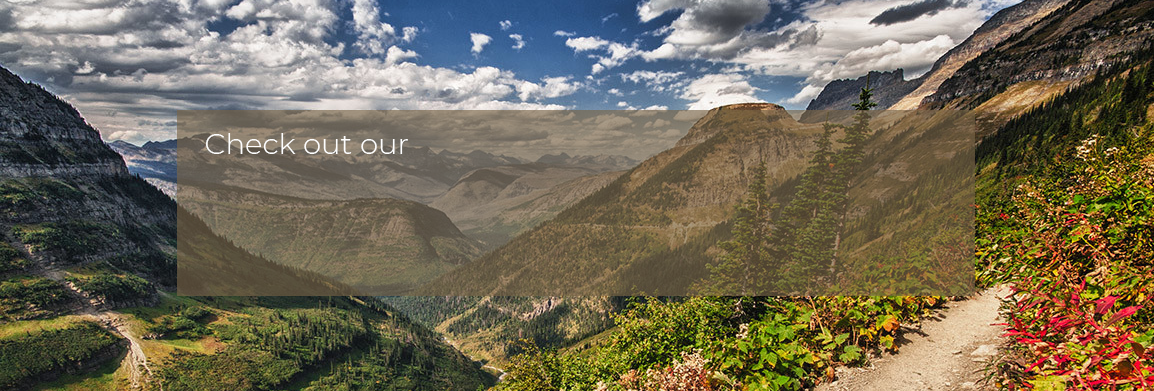
<style>
.page{position:relative;width:1154px;height:391px}
.page>*{position:absolute;margin:0}
.t1{font:29.2px "Montserrat-Light";color:#fefefe}
</style>
<div class="page">
<p class="t1" style="left:206px;top:133px;width:202px;height:21px">Check out our</p>
</div>
